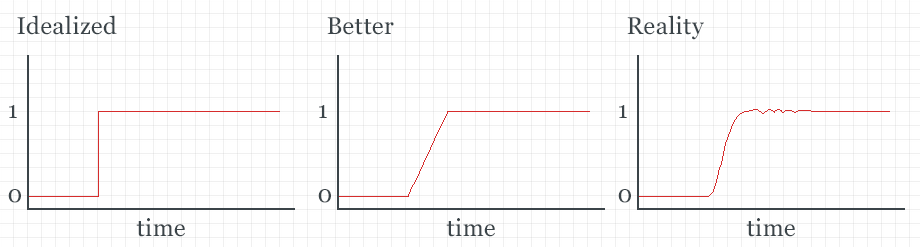
<style>
.page{position:relative;width:920px;height:247px;background:#ffffff}
.page>*{position:absolute;margin:0}
.t1{font:24px "Georgia";letter-spacing:0.02em;color:#3b4449}
</style>
<div class="page">
<p class="t1" style="left:17px;top:15px;width:100px;height:20px">Idealized</p>
<p class="t1" style="left:327px;top:17px;width:67px;height:18px">Better</p>
<p class="t1" style="left:627px;top:15px;width:77px;height:25px">Reality</p>
<p class="t1" style="left:9px;top:105px;width:8px;height:13px">1</p>
<p class="t1" style="left:319px;top:105px;width:8px;height:13px">1</p>
<p class="t1" style="left:619px;top:105px;width:8px;height:13px">1</p>
<p class="t1" style="left:8px;top:189px;width:13px;height:14px">0</p>
<p class="t1" style="left:318px;top:189px;width:13px;height:14px">0</p>
<p class="t1" style="left:618px;top:189px;width:13px;height:14px">0</p>
<p class="t1" style="left:136px;top:218px;width:49px;height:19px">time</p>
<p class="t1" style="left:446px;top:218px;width:49px;height:19px">time</p>
<p class="t1" style="left:746px;top:218px;width:49px;height:19px">time</p>
</div>
